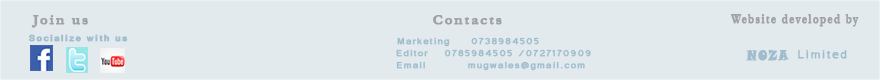
<style>
.page{position:relative;width:880px;height:80px;background:#e2eaed}
.page>*{position:absolute;margin:0}
.t1{font:14.2px "Garamond-Bold";letter-spacing:0.115em;color:#a0a1a3;font-weight:bold}
.t2{font:14.2px "Garamond-Bold";letter-spacing:0.115em;color:#a0a1a3;font-weight:bold;scale:0.75 1}
.t3{font:11.1px "Tunga-Bold";letter-spacing:0.115em;color:#9fbdcc;font-weight:bold}
.t4{font:11.1px "Tunga";letter-spacing:0.115em;color:#9fbdcc;font-weight:bold}
.t5{font:14.2px "SnapITC-Regular";letter-spacing:0.115em;color:#9fbdcc;font-weight:bold;scale:0.75 1}
.t6{font:14.2px "Tunga";letter-spacing:0.115em;color:#9fbdcc;font-weight:bold}
</style>
<div class="page">
<p class="t1" style="left:31px;top:15px;width:57px;height:13px">Join us</p>
<p class="t1" style="left:433px;top:15px;width:69px;height:10px">Contacts</p>
<p class="t2" style="left:730px;top:14px;width:129px;height:13px">Website developed by</p>
<p class="t3" style="left:28px;top:34px;width:100px;height:8px">Socialize with us</p>
<p class="t4" style="left:397px;top:37px;width:142px;height:10px">Marketing    0738984505</p>
<p class="t4" style="left:396px;top:49px;width:195px;height:8px">Editor   0785984505 /0727170909</p>
<p class="t5" style="left:746px;top:50px;width:43px;height:11px">NOZA</p>
<p class="t6" style="left:798px;top:50px;width:49px;height:9px">Limited</p>
<p class="t4" style="left:396px;top:61px;width:189px;height:10px">Email        mugwales@gmail.com</p>
</div>
